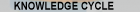
<style>
.page{position:relative;width:140px;height:12px}
.page>*{position:absolute;margin:0}
.t1{font:11px "Arial-BoldMT";color:#000000;scale:0.89 1}
</style>
<div class="page">
<p class="t1" style="left:14px;top:1px;width:100px;height:9px">KNOWLEDGE CYCLE</p>
</div>
